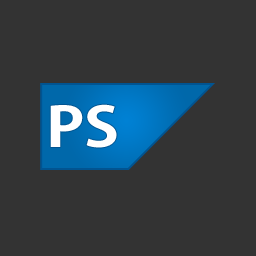
<style>
.page{position:relative;width:256px;height:256px;background:#333333}
.page>*{position:absolute;margin:0}
.t1{font:54.2px "AdobeGothicStd-Bold";color:#ffffff;scale:1.18 1}
</style>
<div class="page">
<p class="t1" style="left:50px;top:104px;width:67px;height:44px">PS</p>
</div>
